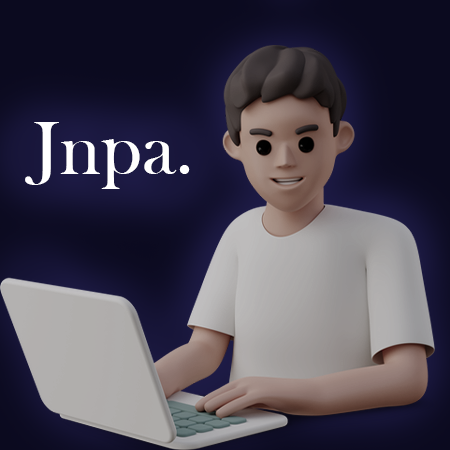
<style>
.page{position:relative;width:450px;height:450px}
.page>*{position:absolute;margin:0}
.t1{font:78.2px "BaskOldFace";color:#ffffff}
</style>
<div class="page">
<p class="t1" style="left:25px;top:122px;width:165px;height:67px">Jnpa.</p>
</div>
